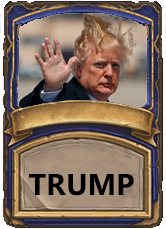
<style>
.page{position:relative;width:166px;height:229px}
.page>*{position:absolute;margin:0}
.t1{font:30px "MicrosoftTaiLe-Bold";color:#000000}
</style>
<div class="page">
<p class="t1" style="left:29px;top:174px;width:105px;height:22px">TRUMP</p>
</div>
